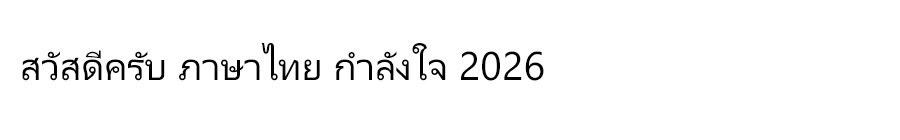
<style>
.page{position:relative;width:900px;height:140px;background:#ffffff}
.page>*{position:absolute;margin:0}
.t1{font:40px "LeelawadeeUI";color:#000000}
</style>
<div class="page">
<p class="t1" style="left:22px;top:43px;width:522px;height:38px">สวัสดีครับ ภาษาไทย กำลังใจ 2026</p>
</div>
